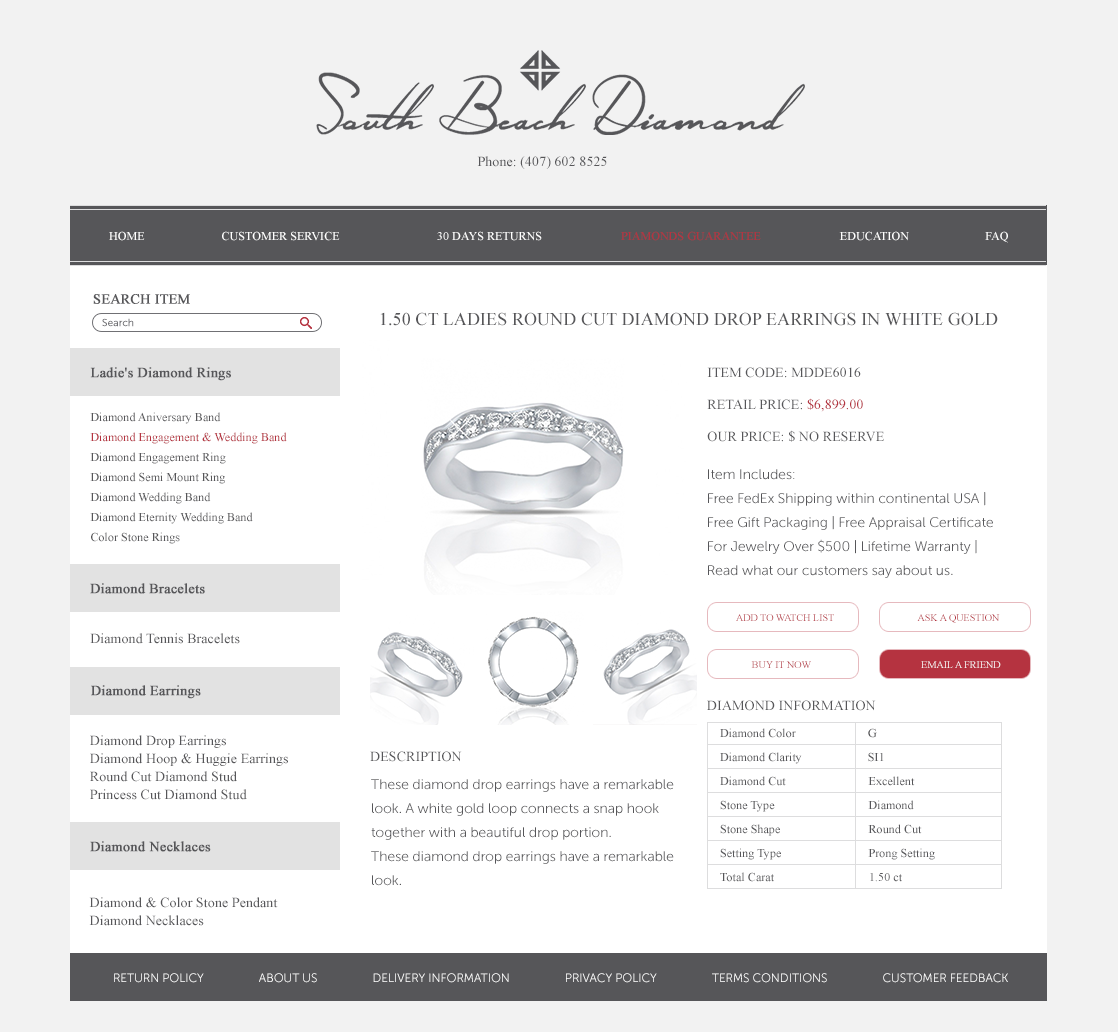
<style>
.page{position:relative;width:1118px;height:1032px;background:#ffffff}
.page>*{position:absolute;margin:0}
.t1{font:14px "TimesNewRomanPSMT";letter-spacing:0.005em;color:#565659;text-transform:uppercase}
.t2{font:14px "TimesNewRomanPSMT";letter-spacing:0.005em;color:#565659}
.t3{font:12px "TimesNewRomanPSMT";letter-spacing:0.005em;color:#ffffff;text-transform:uppercase}
.t4{font:12px "TimesNewRomanPSMT";letter-spacing:0.005em;color:#b53340;text-transform:uppercase}
.t5{font:14px "TimesNewRomanPSMT";color:#565659;text-transform:uppercase;font-weight:bold}
.t6{font:10px "MuseoSansRounded-300";color:#707074;font-weight:bold}
.t7{font:18px "TimesNewRomanPSMT";letter-spacing:0.005em;color:#565659;text-transform:uppercase}
.t8{font:14px "TimesNewRomanPSMT";letter-spacing:0.005em;color:#565659;font-weight:bold}
.t9{font:14px/32px "TimesNewRomanPSMT";letter-spacing:0.005em;color:#565659;text-transform:uppercase}
.t10{font:14px/32px "TimesNewRomanPSMT";letter-spacing:0.005em;color:#b53340;text-transform:uppercase}
.t11{font:12px/20px "TimesNewRomanPSMT";letter-spacing:0.005em;color:#565659}
.t12{font:12px/20px "TimesNewRomanPSMT";letter-spacing:0.005em;color:#b53340}
.t13{font:14px/24px "MuseoSansRounded-300";letter-spacing:0.005em;color:#565659}
.t14{font:14px/26px "MuseoSansRounded-300";letter-spacing:0.005em;color:#565659}
.t15{font:10px "TimesNewRomanPSMT";letter-spacing:0.005em;text-transform:uppercase}
.t16{font:10px "TimesNewRomanPSMT";letter-spacing:0.005em;color:#b53340;text-transform:uppercase}
.t17{font:10px "TimesNewRomanPSMT";letter-spacing:0.005em;color:#ffffff;text-transform:uppercase}
.t18{font:14px/18px "TimesNewRomanPSMT";letter-spacing:0.005em;color:#565659}
.t19{font:12px/24px "TimesNewRomanPSMT";letter-spacing:0.005em;color:#565659}
.t20{font:12px "MuseoSansRounded-300";letter-spacing:0.005em;color:#ffffff;text-transform:uppercase}
</style>
<div class="page">
<p class="t1" style="left:477px;top:156px;width:130px;height:13px"><span class="t2">Phone</span>: (407) 602 8525</p>
<p class="t3" style="left:109px;top:231px;width:36px;height:10px">Home</p>
<p class="t3" style="left:222px;top:231px;width:118px;height:10px">customer service</p>
<p class="t3" style="left:437px;top:231px;width:105px;height:10px">30 days returns</p>
<p class="t4" style="left:621px;top:231px;width:140px;height:10px">piamonds guarantee</p>
<p class="t3" style="left:839px;top:231px;width:70px;height:10px">education</p>
<p class="t3" style="left:985px;top:231px;width:23px;height:12px">faq</p>
<p class="t5" style="left:93px;top:294px;width:97px;height:10px">Search Item</p>
<p class="t6" style="left:102px;top:318px;width:32px;height:9px">Search</p>
<p class="t7" style="left:380px;top:312px;width:618px;height:14px">1.50 ct Ladies Round Cut Diamond Drop Earrings in White Gold</p>
<p class="t8" style="left:90px;top:367px;width:141px;height:14px">Ladie's Diamond Rings</p>
<p class="t9" style="left:707px;top:367px;width:177px;height:75px">Item Code: MDDE6016<br>Retail Price: <span class="t10">$6,899.00<br></span>Our Price: $ No Reserve</p>
<p class="t11" style="left:90px;top:412px;width:197px;height:132px">Diamond Aniversary Band<br><span class="t12">Diamond Engagement &amp; Wedding Band<br></span>Diamond Engagement Ring<br>Diamond Semi Mount Ring<br>Diamond Wedding Band<br>Diamond Eternity Wedding Band<br>Color Stone Rings</p>
<p class="t13" style="left:708px;top:469px;width:285px;height:109px"><span class="t14">Item Includes:<br></span>Free FedEx Shipping within continental USA | Free Gift Packaging | Free Appraisal Certificate For Jewelry Over $500 | Lifetime Warranty | Read what our customers say about us.</p>
<p class="t8" style="left:90px;top:583px;width:115px;height:11px">Diamond Bracelets</p>
<p class="t15" style="left:736px;top:614px;width:98px;height:7px">add to Watch List</p>
<p class="t16" style="left:917px;top:614px;width:83px;height:9px">Ask A Question</p>
<p class="t2" style="left:90px;top:633px;width:150px;height:11px">Diamond Tennis Bracelets</p>
<p class="t15" style="left:751px;top:661px;width:60px;height:7px">Buy it Now</p>
<p class="t17" style="left:921px;top:661px;width:80px;height:7px">Email a Friend</p>
<p class="t8" style="left:91px;top:685px;width:110px;height:14px">Diamond Earrings</p>
<p class="t1" style="left:707px;top:700px;width:169px;height:11px">Diamond Information</p>
<p class="t18" style="left:90px;top:735px;width:198px;height:65px">Diamond Drop Earrings<br>Diamond Hoop &amp; Huggie Earrings<br>Round Cut Diamond Stud<br>Princess Cut Diamond Stud</p>
<p class="t19" style="left:720px;top:728px;width:215px;height:154px">Diamond Color              G<br>Diamond Clarity              SI1<br>Diamond Cut                          Excellent<br>Stone Type                          Diamond<br>Stone Shape                          Round Cut<br>Setting Type                          Prong Setting<br>Total Carat                               1.50 ct</p>
<p class="t1" style="left:370px;top:751px;width:92px;height:11px">Description</p>
<p class="t13" style="left:371px;top:779px;width:303px;height:107px">These diamond drop earrings have a remarkable look. A white gold loop connects a snap hook together with a beautiful drop portion. <br>These diamond drop earrings have a remarkable look.</p>
<p class="t8" style="left:90px;top:841px;width:121px;height:11px">Diamond Necklaces</p>
<p class="t18" style="left:89px;top:897px;width:189px;height:29px">Diamond &amp; Color Stone Pendant<br>Diamond Necklaces</p>
<p class="t20" style="left:114px;top:973px;width:894px;height:10px">RETURN POLICY                  ABOUT US                  DELIVERY INFORMATION                  PRIVACY POLICY                  TERMS CONDITIONS                  CUSTOMER FEEDBACK</p>
</div>
